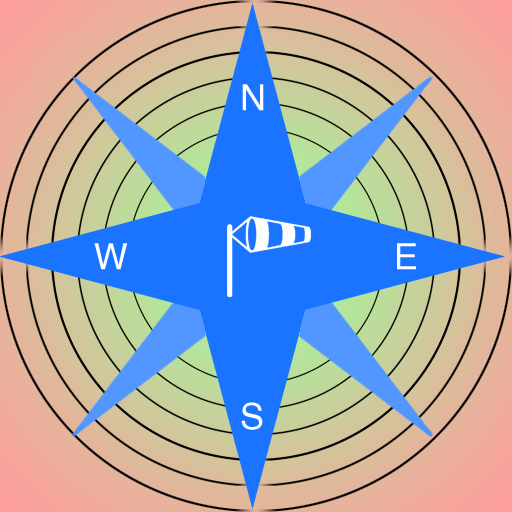
<style>
.page{position:relative;width:512px;height:512px}
.page>*{position:absolute;margin:0}
.t1{font:36px "Helvetica";color:#ffffff}
</style>
<div class="page">
<p class="t1" style="left:242px;top:84px;width:22px;height:27px">N</p>
<p class="t1" style="left:94px;top:243px;width:34px;height:27px">W</p>
<p class="t1" style="left:397px;top:243px;width:19px;height:27px">E</p>
<p class="t1" style="left:241px;top:402px;width:22px;height:28px">S</p>
</div>
